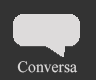
<style>
.page{position:relative;width:96px;height:80px;background:#333333}
.page>*{position:absolute;margin:0}
.t1{font:24.1px "AngsanaUPC";color:#dddbdb}
</style>
<div class="page">
<p class="t1" style="left:17px;top:61px;width:61px;height:12px">Conversa</p>
</div>
